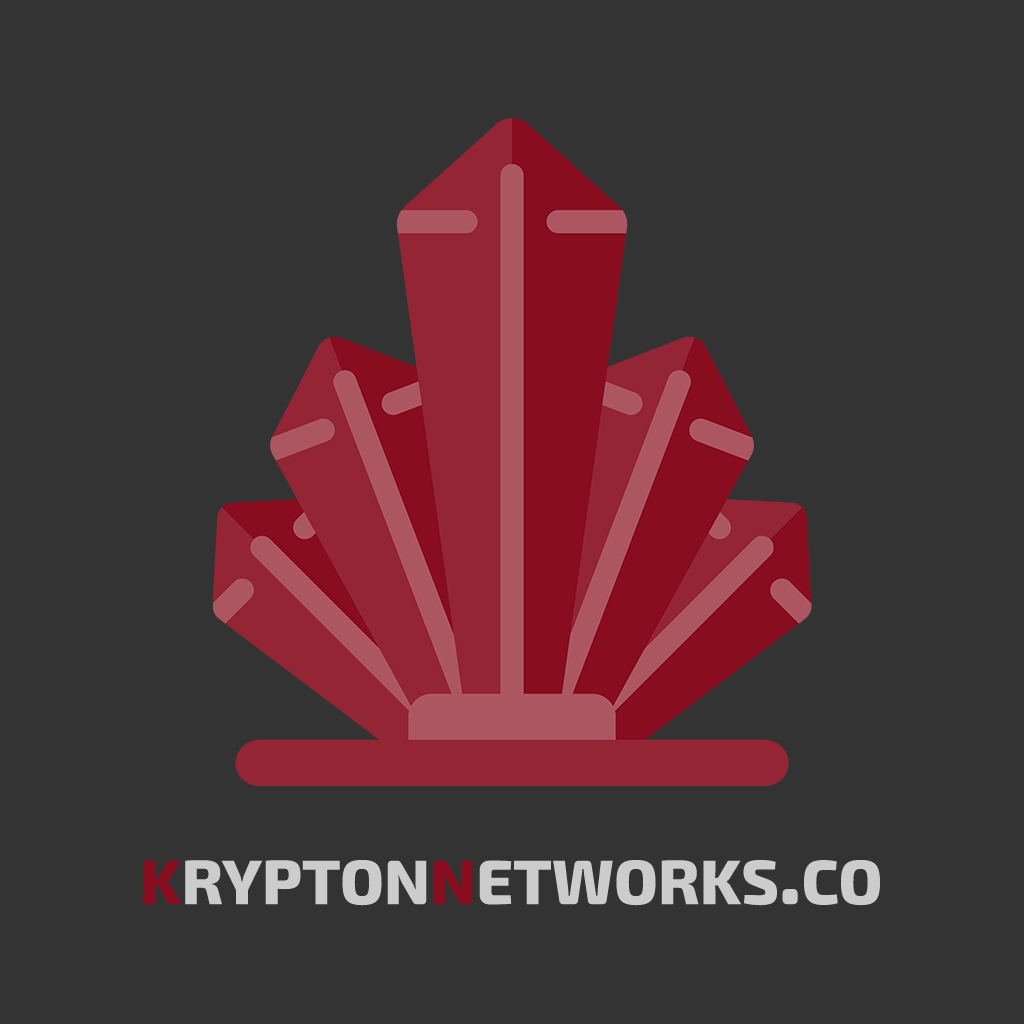
<style>
.page{position:relative;width:1024px;height:1024px;background:#333333}
.page>*{position:absolute;margin:0}
.t1{font:90px "Exo2-ExtraBold";color:#cccccc;font-variant:small-caps}
.t2{font:90px "Exo2-ExtraBold";color:#880d1e;font-variant:small-caps}
</style>
<div class="page">
<p class="t1" style="left:143px;top:860px;width:737px;height:46px"><span class="t2">k</span>rypton<span class="t2">n</span>etworks.co</p>
</div>
